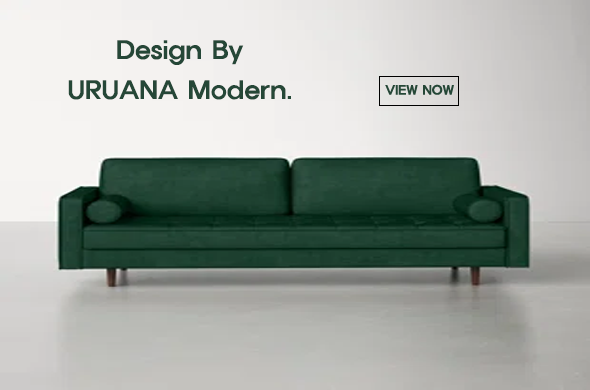
<style>
.page{position:relative;width:590px;height:390px}
.page>*{position:absolute;margin:0}
.t1{font:24px/40px "ExpoM-HM";letter-spacing:0.01em;color:#254737}
</style>
<div class="page">
<p class="t1" style="left:68px;top:40px;width:223px;height:60px;text-align:center">Design By<br>URUANA Modern.</p>
</div>
